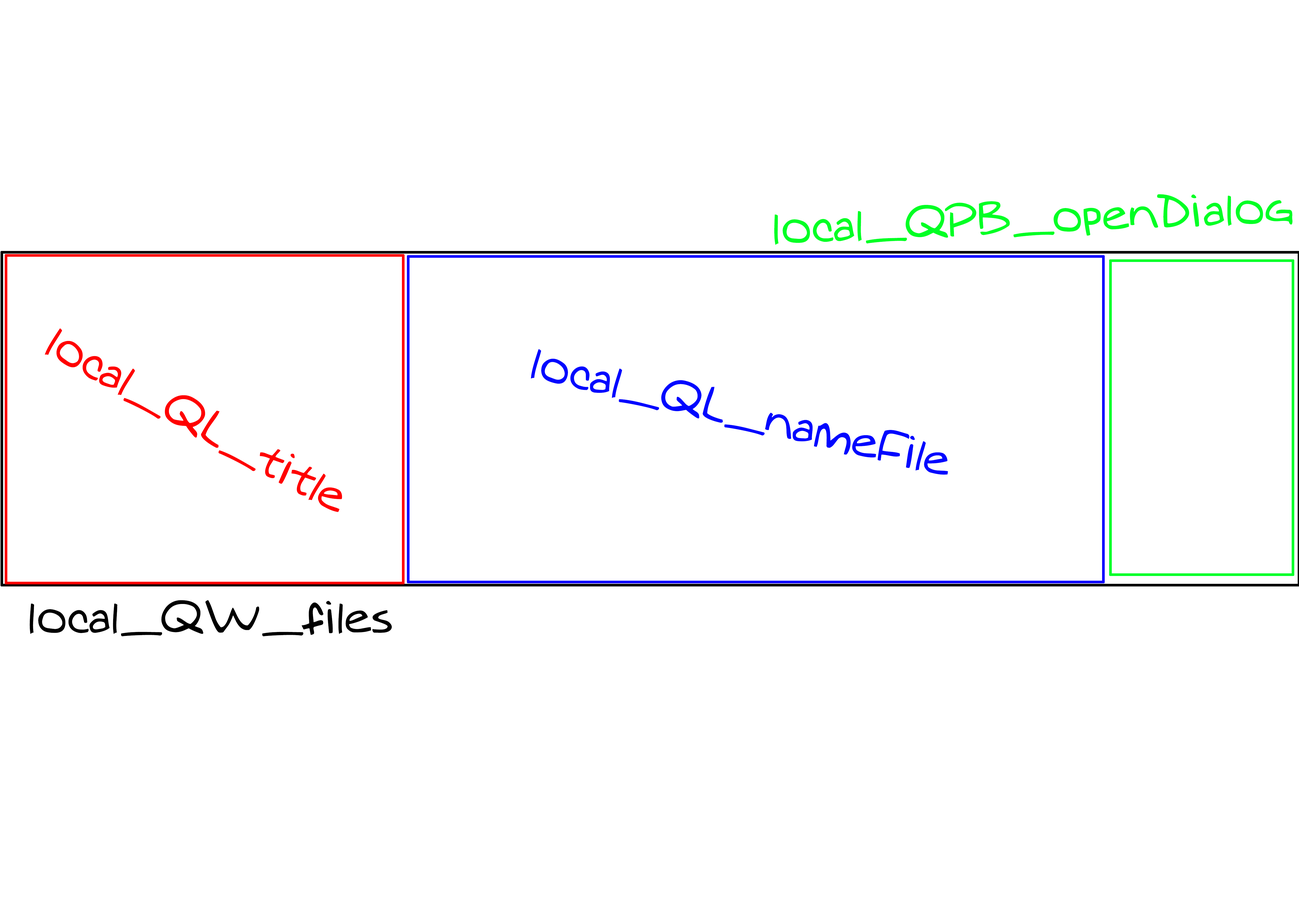
<style>
.page{position:relative;width:1299px;height:918px;background:#ffffff}
.page>*{position:absolute;margin:0}
.t1{font:43.6px "MTOaugie-Regular";color:#00ff24}
.t2{font:43.6px "MTOaugie-Regular";color:#ff0000}
.t3{font:43.6px "MTOaugie-Regular";color:#0006ff}
.t4{font:43.6px "MTOaugie-Regular";color:#000000}
</style>
<div class="page">
<p class="t1" style="left:774px;top:194px;width:518px;height:51px;rotate:-2deg">local_QPB_openDialog</p>
<p class="t2" style="left:45px;top:328px;width:297px;height:184px;rotate:29deg">local_QL_title</p>
<p class="t3" style="left:531px;top:349px;width:417px;height:126px;rotate:13deg">local_QL_nameFile</p>
<p class="t4" style="left:30px;top:600px;width:362px;height:37px">local_QW_files</p>
</div>
